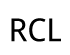
<style>
.page{position:relative;width:70px;height:55px;background:#ffffff}
.page>*{position:absolute;margin:0}
.t1{font:31.8px "DroidSans";color:#000000}
</style>
<div class="page">
<p class="t1" style="left:11px;top:18px;width:50px;height:24px">RCL</p>
</div>
